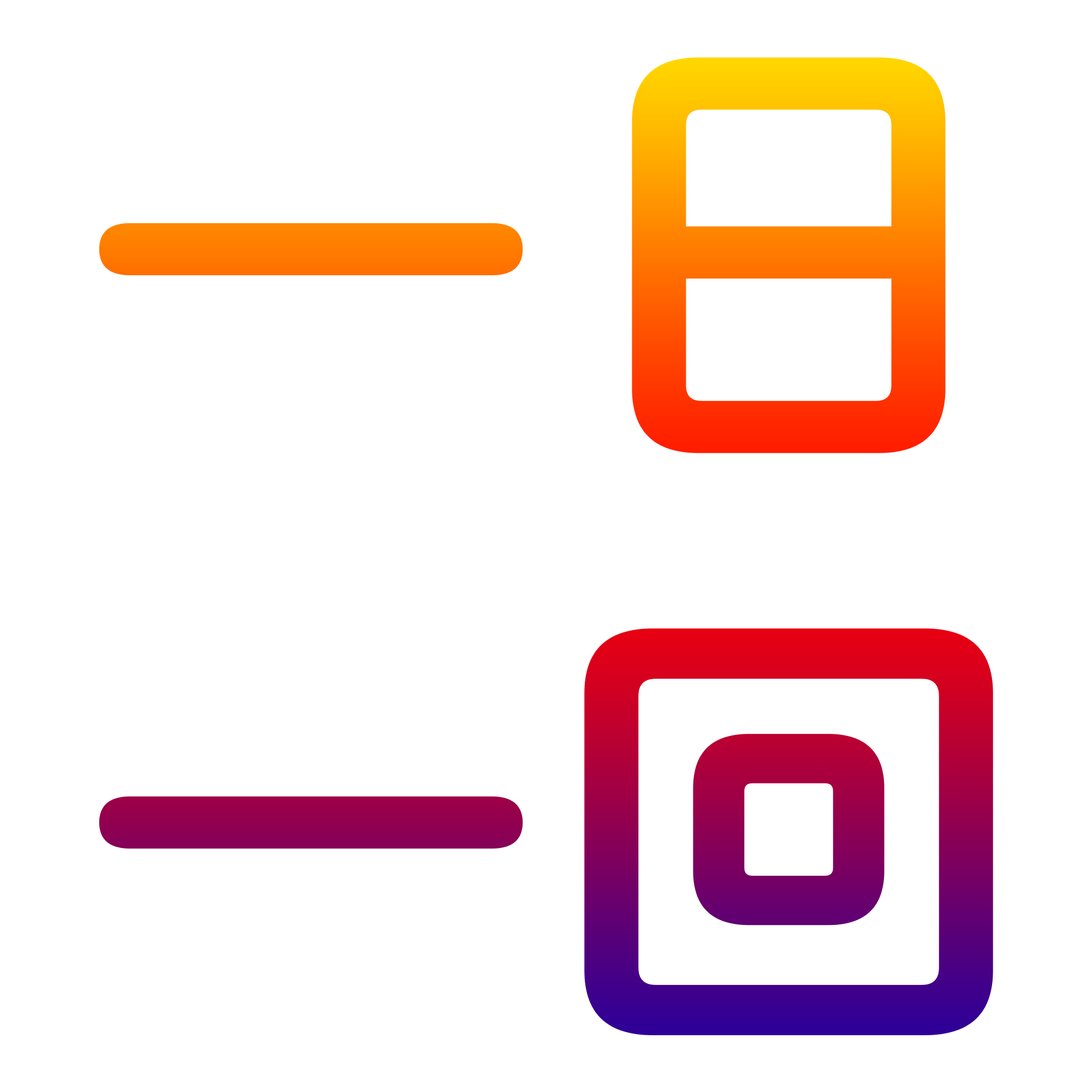
<style>
.page{position:relative;width:1092px;height:1092px;background:#ffffff}
.page>*{position:absolute;margin:0}
.t1{font:477.7px "EPSON-FUTO-MARUGO"}
</style>
<div class="page">
<p class="t1" style="left:102px;top:60px;width:888px;height:972px;text-align:center">一日<br>一回</p>
</div>
